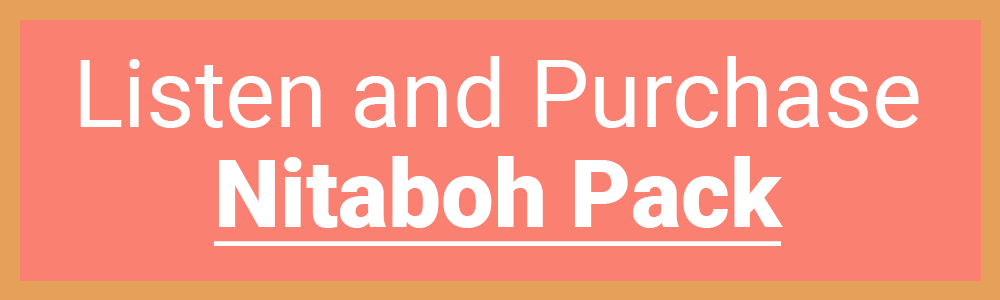
<style>
.page{position:relative;width:1000px;height:300px;background:#fa8072}
.page>*{position:absolute;margin:0}
.t1{font:94px/100px "Roboto-Regular";color:#ffffff}
.t2{font:94px/100px "Roboto-Black";color:#ffffff;text-decoration:underline}
</style>
<div class="page">
<p class="t1" style="left:80px;top:56px;width:839px;height:190px;text-align:center">Listen and Purchase<br><span class="t2">Nitaboh Pack</span></p>
</div>
